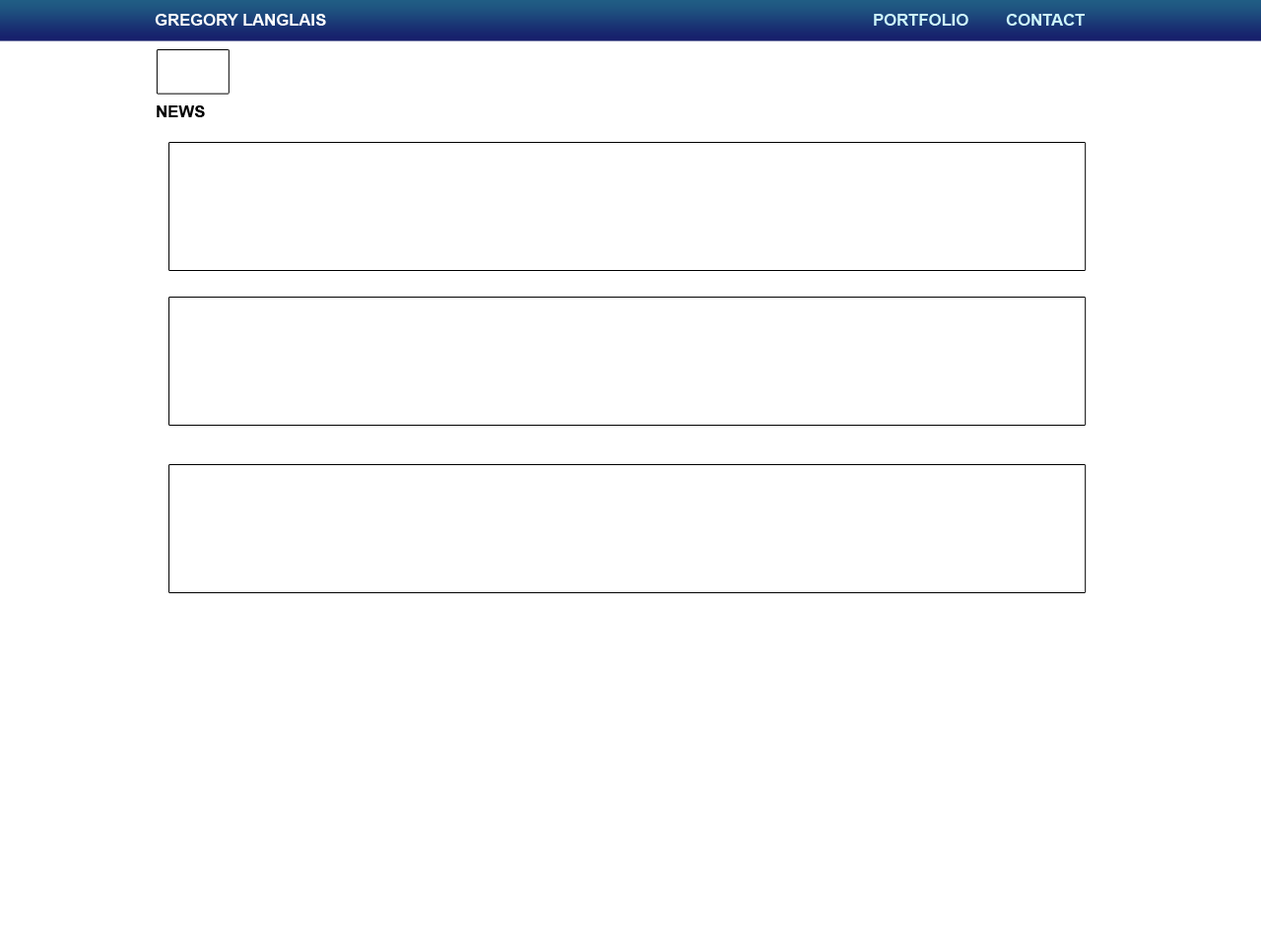
<style>
.page{position:relative;width:1261px;height:946px;background:#ffffff}
.page>*{position:absolute;margin:0}
.t1{font:16.4px "Arial-BoldMT";color:#ffffff}
.t2{font:16.4px "Arial-BoldMT";color:#cdf6fb;text-transform:uppercase}
.t3{font:16.4px "Arial-BoldMT";color:#000000}
</style>
<div class="page">
<p class="t1" style="left:155px;top:14px;width:171px;height:12px">GREGORY LANGLAIS</p>
<p class="t2" style="left:874px;top:14px;width:94px;height:12px">PORTFOLIO</p>
<p class="t2" style="left:1006px;top:14px;width:79px;height:12px">CONTACT</p>
<p class="t3" style="left:157px;top:105px;width:48px;height:12px">NEWS</p>
</div>
